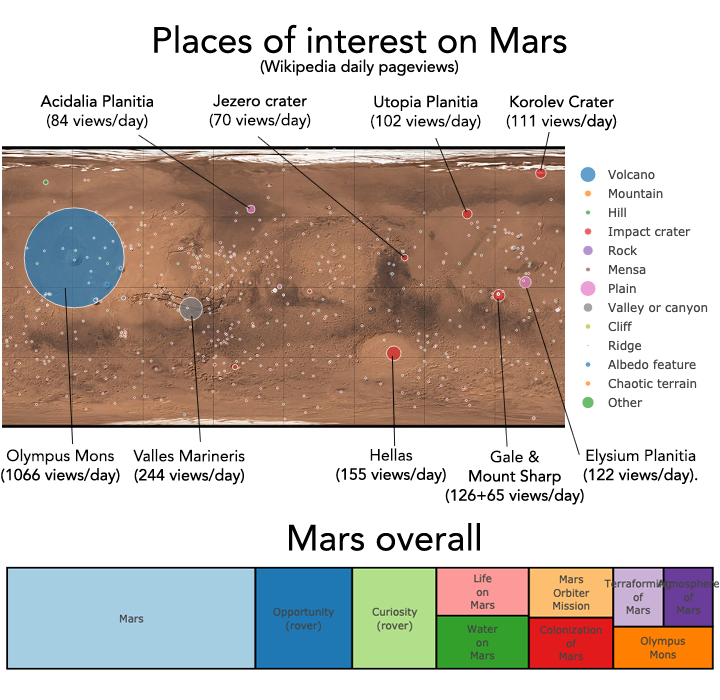
<style>
.page{position:relative;width:720px;height:700px;background:#ffffff}
.page>*{position:absolute;margin:0}
.t1{font:16px "Avenir-Roman";color:#000000}
.t2{font:36px "Avenir-Roman";color:#000000}
</style>
<div class="page">
<p class="t1" style="left:154px;top:24px;width:413px;height:52px;text-align:center"><span class="t2">Places of interest on Mars</span><br>(Wikipedia daily pageviews)</p>
<p class="t1" style="left:40px;top:94px;width:114px;height:36px;text-align:center">Acidalia Planitia<br>(84 views/day)</p>
<p class="t1" style="left:209px;top:94px;width:102px;height:36px;text-align:center">Jezero crater<br>(70 views/day)</p>
<p class="t1" style="left:371px;top:95px;width:110px;height:36px;text-align:center">Utopia Planitia<br>(102 views/day)</p>
<p class="t1" style="left:506px;top:95px;width:111px;height:36px;text-align:center">Korolev Crater<br>(111 views/day)</p>
<p class="t1" style="left:1px;top:448px;width:119px;height:37px;text-align:center">Olympus Mons<br>(1066 views/day)</p>
<p class="t1" style="left:133px;top:449px;width:112px;height:36px;text-align:center">Valles Marineris<br>(244 views/day)</p>
<p class="t1" style="left:336px;top:448px;width:110px;height:36px;text-align:center">Hellas<br>(155 views/day)</p>
<p class="t1" style="left:583px;top:448px;width:115px;height:36px;text-align:center">Elysium Planitia<br>(122 views/day).</p>
<p class="t1" style="left:445px;top:450px;width:139px;height:55px;text-align:center">Gale &amp;<br>Mount Sharp<br>(126+65 views/day)</p>
<p class="t2" style="left:289px;top:523px;width:191px;height:28px">Mars overall</p>
</div>
